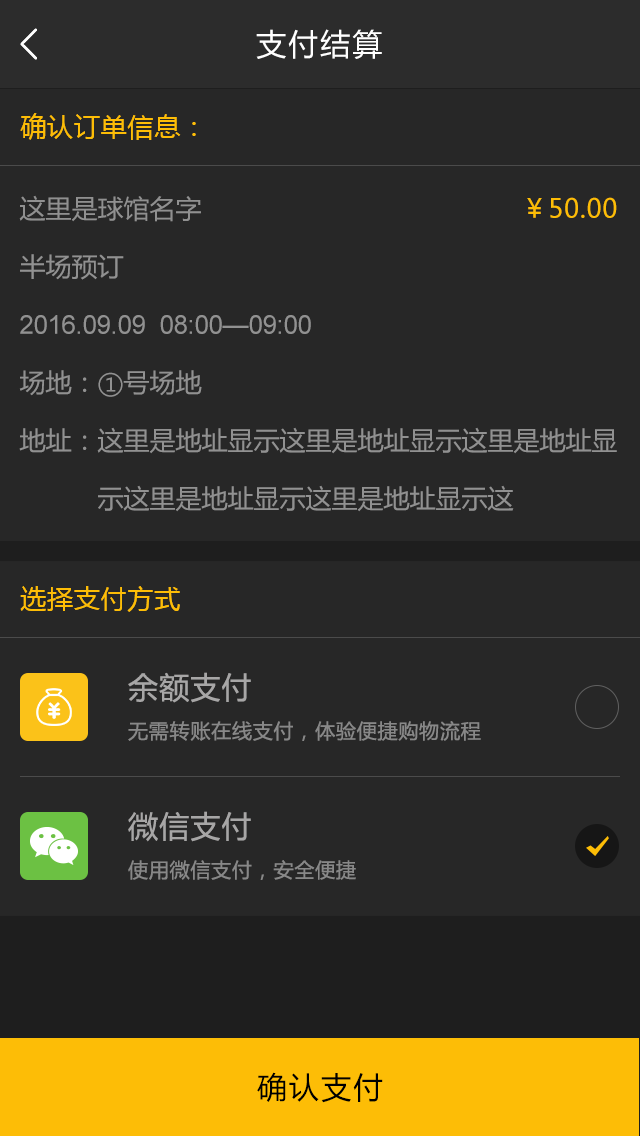
<style>
.page{position:relative;width:640px;height:1136px;background:#272727}
.page>*{position:absolute;margin:0}
.t1{font:30px "MicrosoftYaHei";letter-spacing:0.07em;color:#ffffff}
.t2{font:26px "MicrosoftYaHei";letter-spacing:0.03em;color:#fdbd06}
.t3{font:26px/58px "MicrosoftYaHei";color:#919191}
.t4{font:26px/58px "MicrosoftYaHei";color:#909090}
.t5{font:26px/58px "MicrosoftYaHei";letter-spacing:0.03em;color:#fdbd06}
.t6{font:26px/58px "ArialMT";color:#919191}
.t7{font:30px "MicrosoftYaHei";letter-spacing:0.04em;color:#a7a6a6}
.t8{font:20px "MicrosoftYaHei";letter-spacing:0.04em;color:#888888}
.t9{font:30px "MicrosoftYaHei";letter-spacing:0.07em;color:#000000}
</style>
<div class="page">
<p class="t1" style="left:256px;top:29px;width:126px;height:30px">支付结算</p>
<p class="t2" style="left:20px;top:113px;width:176px;height:27px">确认订单信息：</p>
<p class="t3" style="left:19px;top:195px;width:598px;height:317px"><span class="t4">这里是球馆名字                                        </span><span class="t5">￥50.00<br></span>半场预订<br><span class="t6">2016.09.09  08:00—09:00<br></span>场地：①号场地<br>地址：这里是地址显示这里是地址显示这里是地址显　　　示这里是地址显示这里是地址显示这</p>
<p class="t2" style="left:20px;top:586px;width:160px;height:26px">选择支付方式</p>
<p class="t7" style="left:128px;top:672px;width:123px;height:31px">余额支付</p>
<p class="t8" style="left:128px;top:721px;width:353px;height:20px">无需转账在线支付，体验便捷购物流程</p>
<p class="t7" style="left:128px;top:811px;width:123px;height:31px">微信支付</p>
<p class="t8" style="left:128px;top:860px;width:228px;height:20px">使用微信支付，安全便捷</p>
<p class="t9" style="left:257px;top:1072px;width:126px;height:31px">确认支付</p>
</div>
